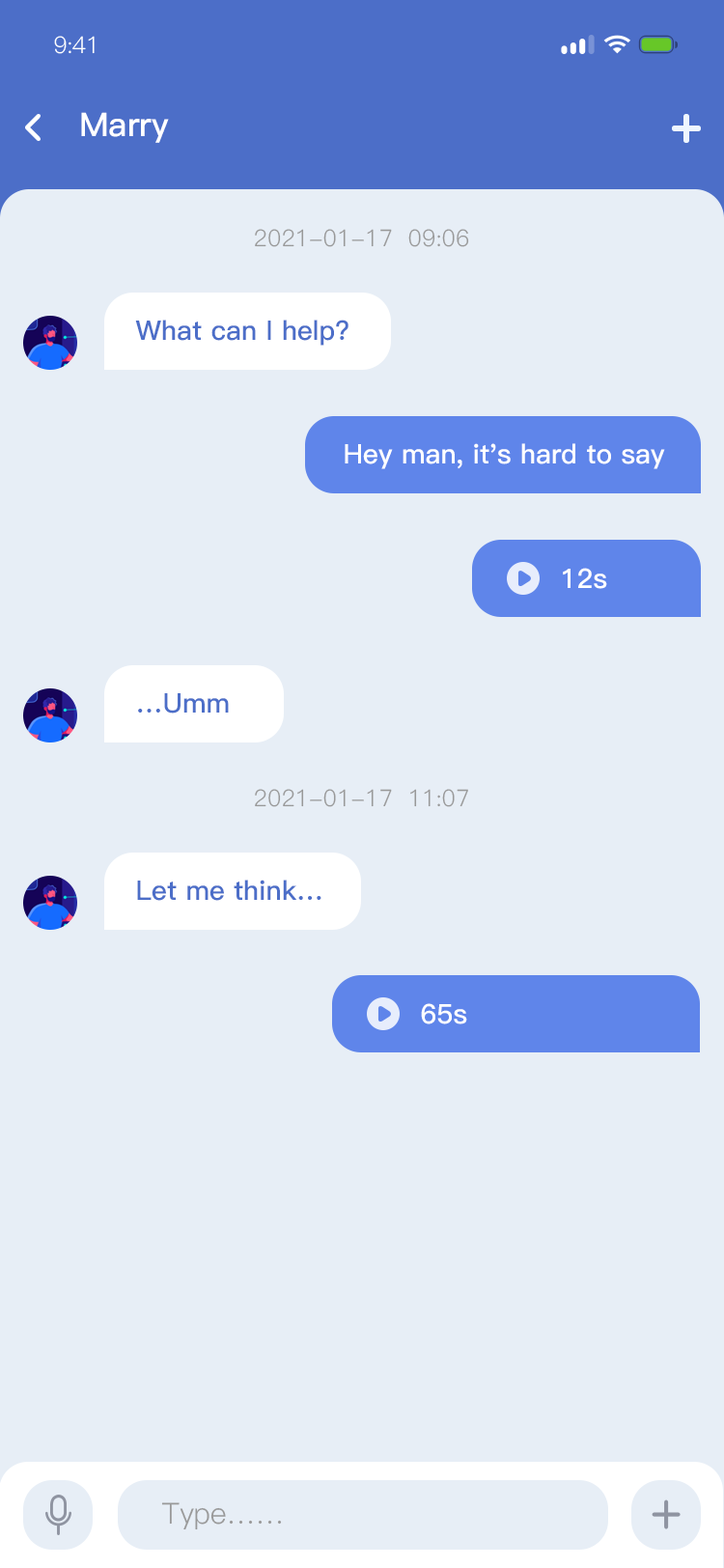
<style>
.page{position:relative;width:724px;height:1568px;background:#e7eef6}
.page>*{position:absolute;margin:0}
.t1{font:23.2px "PingFang-SC-Regular";letter-spacing:-0.025em;color:#ffffff}
.t2{font:32.8px "PingFang-SC-Bold";color:#ffffff}
.t3{font:23.2px "PingFang-SC-Regular";color:#999999}
.t4{font:27px "PingFang-SC-Bold";color:#4c6ec8}
.t5{font:27px "PingFang-SC-Bold";color:#ffffff}
.t6{font:29px "PingFang-SC-Regular";color:#999999}
</style>
<div class="page">
<p class="t1" style="left:54px;top:36px;width:41px;height:18px">9:41</p>
<p class="t2" style="left:81px;top:112px;width:88px;height:31px">Marry</p>
<p class="t3" style="left:255px;top:229px;width:214px;height:18px">2021-01-17  09:06</p>
<p class="t4" style="left:135px;top:320px;width:214px;height:26px">What can I help？</p>
<p class="t5" style="left:345px;top:443px;width:320px;height:26px">Hey man, it's hard to say</p>
<p class="t5" style="left:563px;top:568px;width:44px;height:21px">12s</p>
<p class="t4" style="left:138px;top:693px;width:91px;height:21px">…Umm</p>
<p class="t3" style="left:255px;top:789px;width:213px;height:18px">2021-01-17  11:07</p>
<p class="t4" style="left:137px;top:880px;width:185px;height:21px">Let me think…</p>
<p class="t5" style="left:421px;top:1003px;width:46px;height:21px">65s</p>
<p class="t6" style="left:161px;top:1502px;width:121px;height:28px">Type……</p>
</div>
